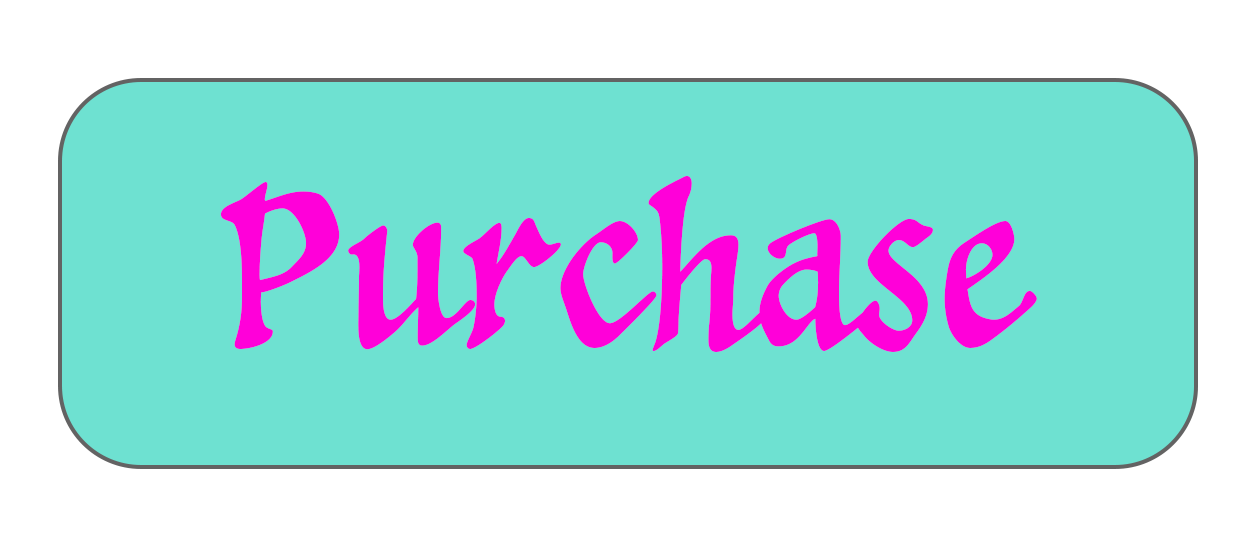
<style>
.page{position:relative;width:1260px;height:545px;background:#6ee1d1}
.page>*{position:absolute;margin:0}
.t1{font:200.9px "CCSpellcaster";letter-spacing:0.04em;color:#ff00d9}
</style>
<div class="page">
<p class="t1" style="left:220px;top:176px;width:817px;height:176px">Purchase</p>
</div>
